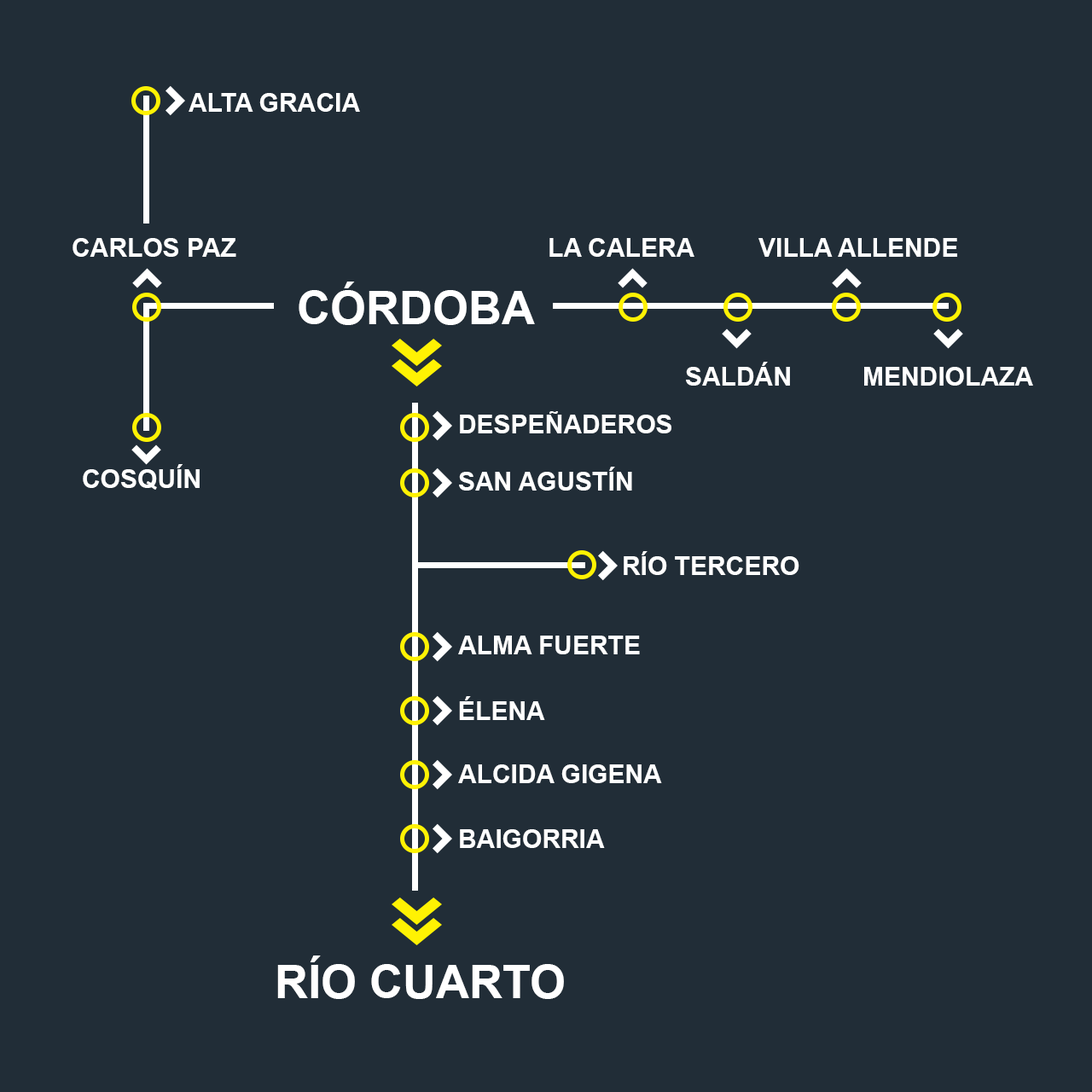
<style>
.page{position:relative;width:1092px;height:1092px;background:#212d37}
.page>*{position:absolute;margin:0}
.t1{font:25.6px "Arial-BoldMT";color:#ffffff}
.t2{font:46.1px "Arial-BoldMT";color:#ffffff}
</style>
<div class="page">
<p class="t1" style="left:189px;top:93px;width:171px;height:19px">ALTA GRACIA</p>
<p class="t1" style="left:73px;top:238px;width:163px;height:19px">CARLOS PAZ</p>
<p class="t1" style="left:549px;top:238px;width:145px;height:19px">LA CALERA</p>
<p class="t1" style="left:758px;top:238px;width:199px;height:19px">VILLA ALLENDE</p>
<p class="t2" style="left:299px;top:282px;width:236px;height:43px">CÓRDOBA</p>
<p class="t1" style="left:686px;top:362px;width:104px;height:24px">SALDÁN</p>
<p class="t1" style="left:864px;top:367px;width:169px;height:19px">MENDIOLAZA</p>
<p class="t1" style="left:460px;top:411px;width:211px;height:22px">DESPEÑADEROS</p>
<p class="t1" style="left:83px;top:464px;width:117px;height:26px">COSQUÍN</p>
<p class="t1" style="left:459px;top:467px;width:173px;height:24px">SAN AGUSTÍN</p>
<p class="t1" style="left:624px;top:551px;width:175px;height:24px">RÍO TERCERO</p>
<p class="t1" style="left:458px;top:636px;width:182px;height:18px">ALMA FUERTE</p>
<p class="t1" style="left:459px;top:696px;width:86px;height:24px">ÉLENA</p>
<p class="t1" style="left:458px;top:764px;width:204px;height:19px">ALCIDA GIGENA</p>
<p class="t1" style="left:460px;top:829px;width:145px;height:19px">BAIGORRIA</p>
<p class="t2" style="left:277px;top:955px;width:287px;height:44px">RÍO CUARTO</p>
</div>
